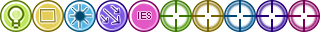
<style>
.page{position:relative;width:320px;height:32px;background:#ffffff}
.page>*{position:absolute;margin:0}
.t1{font:9px "ArialMT";color:#7b0061}
</style>
<div class="page">
<p class="t1" style="left:138px;top:12px;width:13px;height:7px">IES</p>
</div>
